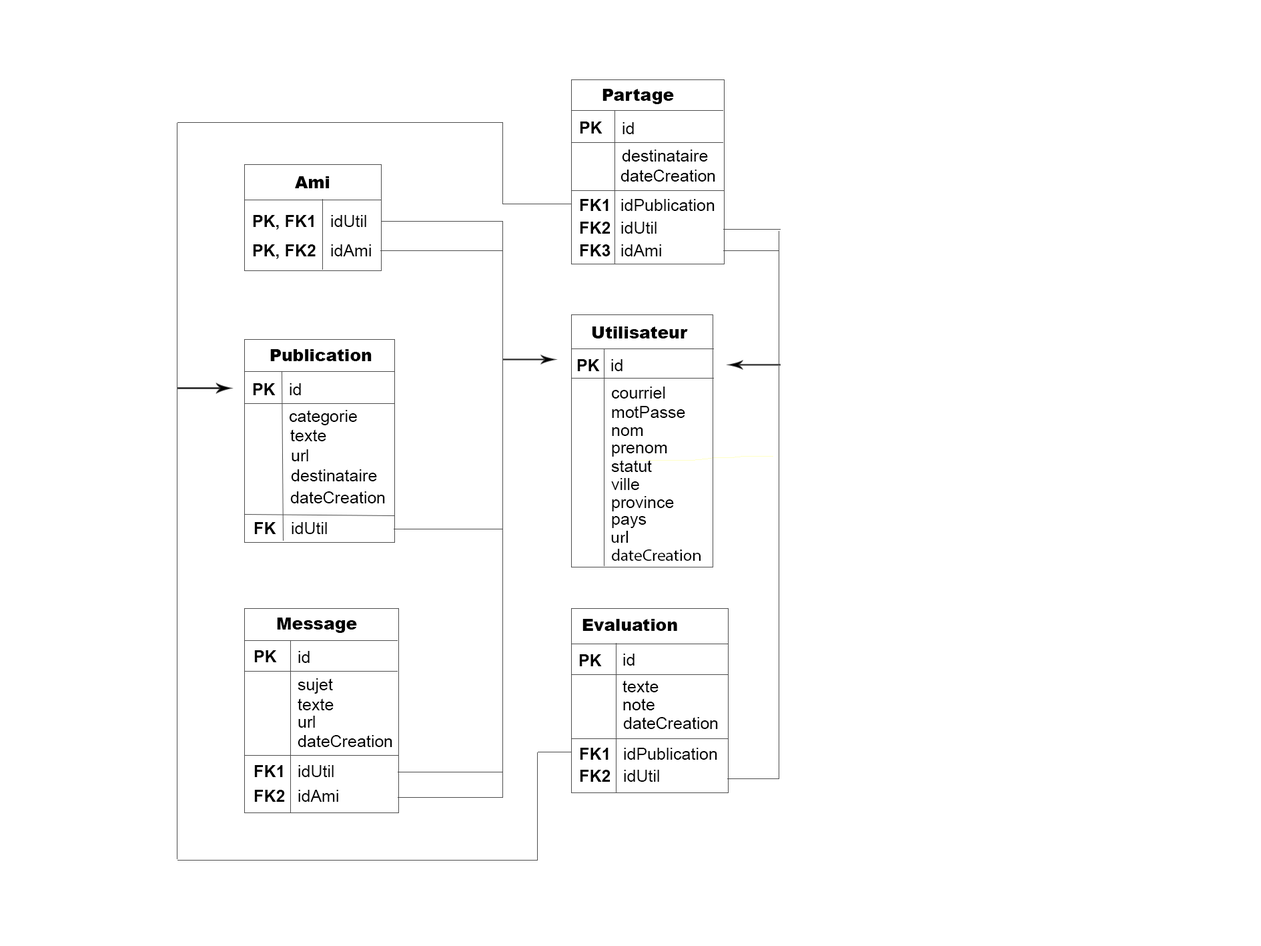
<style>
.page{position:relative;width:1261px;height:946px;background:#ffffff}
.page>*{position:absolute;margin:0}
.t1{font:16.7px "Arial-Black";color:#000000}
.t2{font:16.7px "Arial-BoldMT";color:#000000}
.t3{font:16.7px "ArialMT";color:#000000}
.t4{font:16.7px "MyriadPro-Regular";color:#000000}
</style>
<div class="page">
<p class="t1" style="left:603px;top:89px;width:71px;height:15px">Partage</p>
<p class="t2" style="left:580px;top:121px;width:23px;height:12px">PK</p>
<p class="t3" style="left:623px;top:122px;width:11px;height:12px">id</p>
<p class="t3" style="left:622px;top:149px;width:86px;height:12px">destinataire</p>
<p class="t3" style="left:621px;top:169px;width:94px;height:12px">dateCreation</p>
<p class="t1" style="left:295px;top:176px;width:35px;height:12px">Ami</p>
<p class="t2" style="left:580px;top:199px;width:29px;height:12px">FK1</p>
<p class="t3" style="left:621px;top:199px;width:94px;height:12px">idPublication</p>
<p class="t2" style="left:253px;top:215px;width:61px;height:15px">PK, FK1</p>
<p class="t3" style="left:331px;top:215px;width:35px;height:12px">idUtil</p>
<p class="t2" style="left:580px;top:222px;width:31px;height:12px">FK2</p>
<p class="t3" style="left:621px;top:222px;width:36px;height:12px">idUtil</p>
<p class="t2" style="left:253px;top:244px;width:63px;height:15px">PK, FK2</p>
<p class="t3" style="left:331px;top:244px;width:40px;height:12px">idAmi</p>
<p class="t2" style="left:580px;top:244px;width:31px;height:12px">FK3</p>
<p class="t3" style="left:621px;top:244px;width:40px;height:12px">idAmi</p>
<p class="t1" style="left:592px;top:326px;width:96px;height:12px">Utilisateur</p>
<p class="t1" style="left:270px;top:349px;width:102px;height:12px">Publication</p>
<p class="t2" style="left:577px;top:359px;width:23px;height:12px">PK</p>
<p class="t3" style="left:611px;top:359px;width:12px;height:12px">id</p>
<p class="t2" style="left:253px;top:383px;width:23px;height:12px">PK</p>
<p class="t3" style="left:290px;top:383px;width:11px;height:12px">id</p>
<p class="t3" style="left:612px;top:386px;width:53px;height:12px">courriel</p>
<p class="t3" style="left:290px;top:410px;width:67px;height:15px">categorie</p>
<p class="t3" style="left:612px;top:406px;width:73px;height:12px">motPasse</p>
<p class="t3" style="left:290px;top:429px;width:36px;height:12px">texte</p>
<p class="t3" style="left:612px;top:427px;width:31px;height:9px">nom</p>
<p class="t3" style="left:292px;top:449px;width:16px;height:12px">url</p>
<p class="t3" style="left:612px;top:444px;width:55px;height:12px">prenom</p>
<p class="t3" style="left:611px;top:460px;width:41px;height:12px">statut</p>
<p class="t3" style="left:291px;top:469px;width:86px;height:12px">destinataire</p>
<p class="t3" style="left:611px;top:478px;width:28px;height:12px">ville</p>
<p class="t3" style="left:290px;top:491px;width:95px;height:12px">dateCreation</p>
<p class="t3" style="left:612px;top:496px;width:62px;height:15px">province</p>
<p class="t2" style="left:254px;top:522px;width:22px;height:12px">FK</p>
<p class="t3" style="left:292px;top:522px;width:35px;height:12px">idUtil</p>
<p class="t3" style="left:612px;top:516px;width:35px;height:12px">pays</p>
<p class="t4" style="left:611px;top:530px;width:17px;height:12px">url</p>
<p class="t4" style="left:612px;top:548px;width:89px;height:13px">dateCreation</p>
<p class="t1" style="left:277px;top:617px;width:80px;height:16px">Message</p>
<p class="t1" style="left:583px;top:619px;width:94px;height:12px">Evaluation</p>
<p class="t2" style="left:254px;top:650px;width:23px;height:12px">PK</p>
<p class="t3" style="left:298px;top:651px;width:12px;height:12px">id</p>
<p class="t2" style="left:579px;top:654px;width:23px;height:12px">PK</p>
<p class="t3" style="left:623px;top:653px;width:12px;height:12px">id</p>
<p class="t3" style="left:298px;top:678px;width:35px;height:15px">sujet</p>
<p class="t3" style="left:623px;top:680px;width:36px;height:12px">texte</p>
<p class="t3" style="left:298px;top:698px;width:36px;height:12px">texte</p>
<p class="t3" style="left:623px;top:698px;width:32px;height:12px">note</p>
<p class="t3" style="left:298px;top:715px;width:17px;height:12px">url</p>
<p class="t3" style="left:623px;top:717px;width:95px;height:12px">dateCreation</p>
<p class="t3" style="left:298px;top:735px;width:94px;height:12px">dateCreation</p>
<p class="t2" style="left:580px;top:747px;width:29px;height:12px">FK1</p>
<p class="t3" style="left:624px;top:747px;width:93px;height:12px">idPublication</p>
<p class="t2" style="left:254px;top:765px;width:29px;height:12px">FK1</p>
<p class="t3" style="left:298px;top:765px;width:36px;height:12px">idUtil</p>
<p class="t2" style="left:580px;top:769px;width:31px;height:12px">FK2</p>
<p class="t3" style="left:624px;top:769px;width:35px;height:12px">idUtil</p>
<p class="t2" style="left:254px;top:789px;width:31px;height:12px">FK2</p>
<p class="t3" style="left:298px;top:789px;width:40px;height:12px">idAmi</p>
</div>
